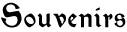
<style>
.page{position:relative;width:127px;height:32px;background:#ffffff}
.page>*{position:absolute;margin:0}
.t1{font:24px "Kelmscott-Regular";letter-spacing:0.05em;color:#000000}
.t2{font:30px "Kelmscott-Regular";letter-spacing:0.05em;color:#000000}
</style>
<div class="page">
<p class="t1" style="left:1px;top:2px;width:125px;height:26px"><span class="t2">S</span>ouvenirs</p>
</div>
